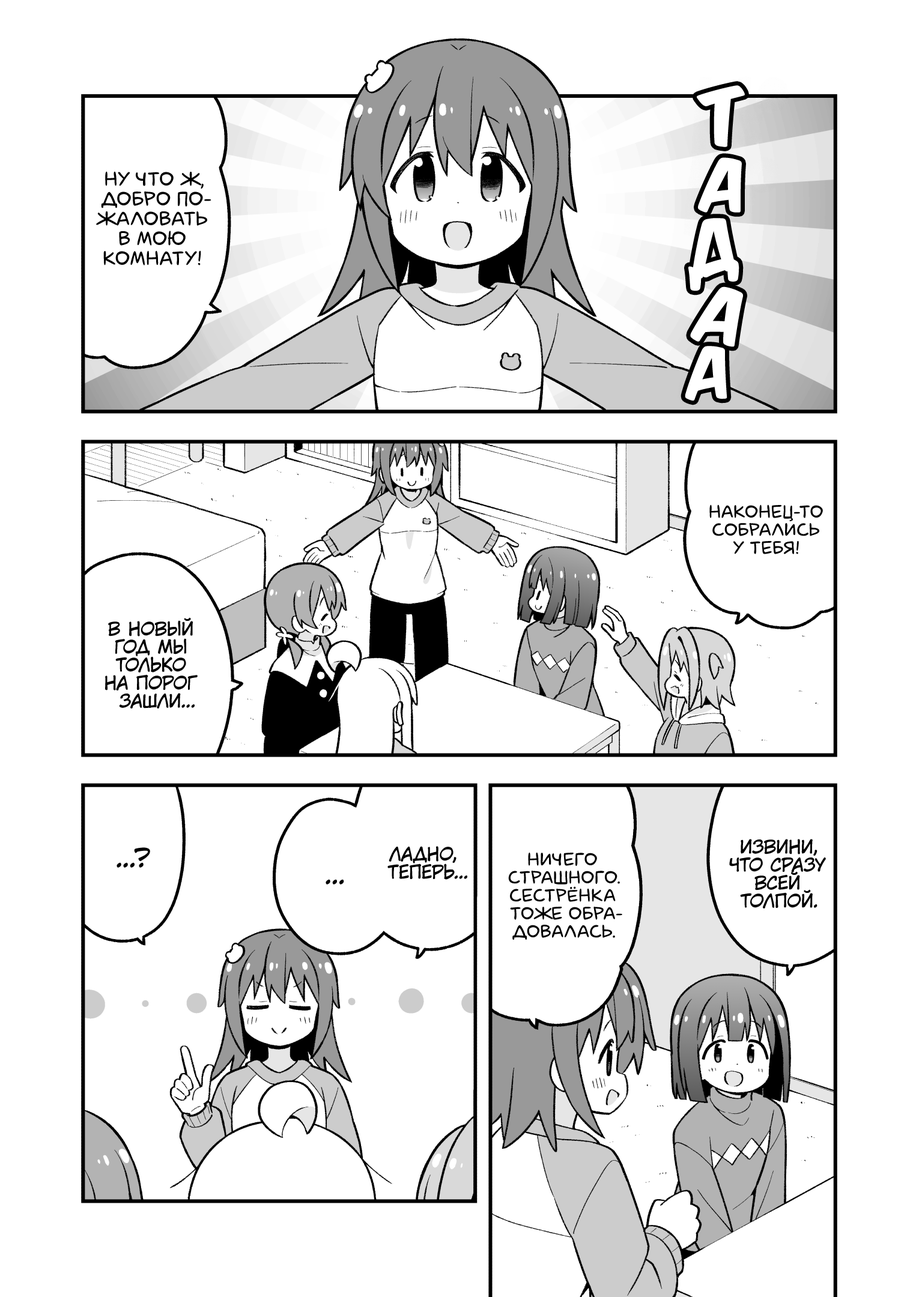
<style>
.page{position:relative;width:919px;height:1297px;background:#ffffff}
.page>*{position:absolute;margin:0}
.t1{font:66.1px "KomikaTitle-AxisRUS-LAT";color:#ffffff}
.t2{font:61.3px "KomikaTitle-AxisRUS-LAT";color:#ffffff}
.t3{font:19.8px "laCartoonerie";color:#000000;text-transform:uppercase}
.t4{font:63.1px "KomikaTitle-AxisRUS-LAT";color:#ffffff}
.t5{font:64.9px "KomikaTitle-AxisRUS-LAT";color:#ffffff}
.t6{font:60.1px "KomikaTitle-AxisRUS-LAT";color:#ffffff}
.t7{font:18px "laCartoonerie";color:#000000;text-transform:uppercase}
.t8{font:18px "KuraiVoice2";color:#000000;text-transform:uppercase}
.t9{font:25.2px "KuraiVoice2";color:#000000;text-transform:uppercase}
</style>
<div class="page">
<p class="t1" style="left:697px;top:85px;width:48px;height:62px;rotate:-9deg">т</p>
<p class="t2" style="left:698px;top:157px;width:44px;height:56px">а</p>
<p class="t3" style="left:96px;top:171px;width:115px;height:95px;text-align:center">Ну что ж,<br>добро по-<br>жаловать<br>в мою<br>комнату!</p>
<p class="t4" style="left:688px;top:218px;width:51px;height:73px;rotate:-13deg">д</p>
<p class="t5" style="left:690px;top:287px;width:53px;height:60px;rotate:8deg">а</p>
<p class="t6" style="left:685px;top:346px;width:42px;height:55px;rotate:-4deg">а</p>
<p class="t7" style="left:709px;top:505px;width:114px;height:49px;text-align:center">Наконец-то<br>собрались<br>у тебя!</p>
<p class="t8" style="left:105px;top:618px;width:93px;height:91px;text-align:center">В Новый<br>Год мы<br>только<br>на порог<br>зашли...</p>
<p class="t8" style="left:729px;top:839px;width:97px;height:70px;text-align:center">Извини,<br>что сразу<br>всей<br>толпой.</p>
<p class="t9" style="left:117px;top:848px;width:33px;height:20px">...?</p>
<p class="t8" style="left:387px;top:846px;width:80px;height:34px;text-align:center">Ладно,<br>теперь...</p>
<p class="t7" style="left:508px;top:852px;width:114px;height:88px;text-align:center">Ничего<br>страшного.<br>Сестрёнка<br>тоже обра-<br>довалась.</p>
<p class="t9" style="left:326px;top:879px;width:18px;height:6px">...</p>
</div>
